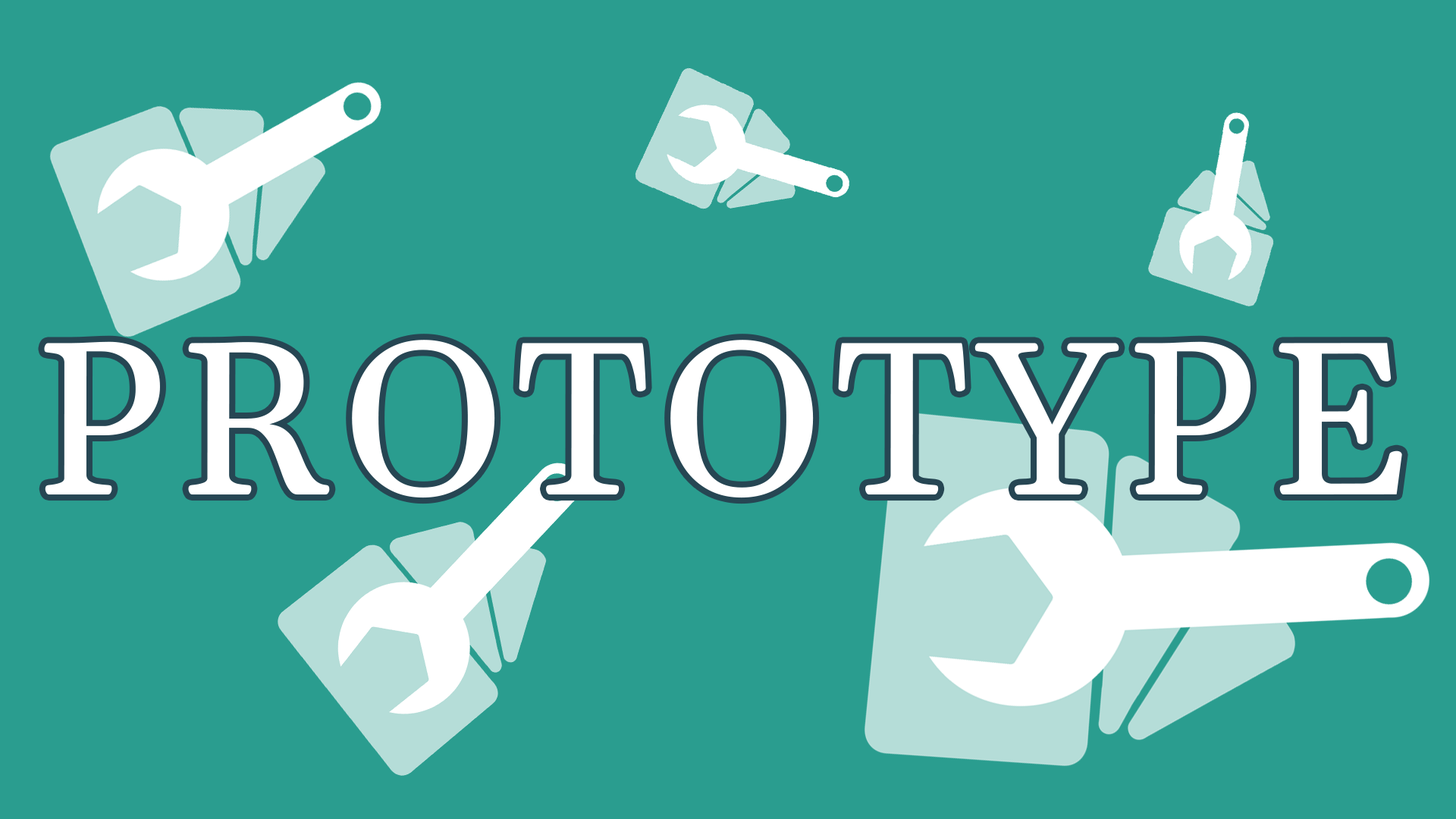
<style>
.page{position:relative;width:1456px;height:819px;background:#2a9d8f}
.page>*{position:absolute;margin:0}
.t1{font:218px "Gelasio-Regular";letter-spacing:0.05em;color:#ffffff}
</style>
<div class="page">
<p class="t1" style="left:44px;top:340px;width:1358px;height:158px">PROTOTYPE</p>
</div>
